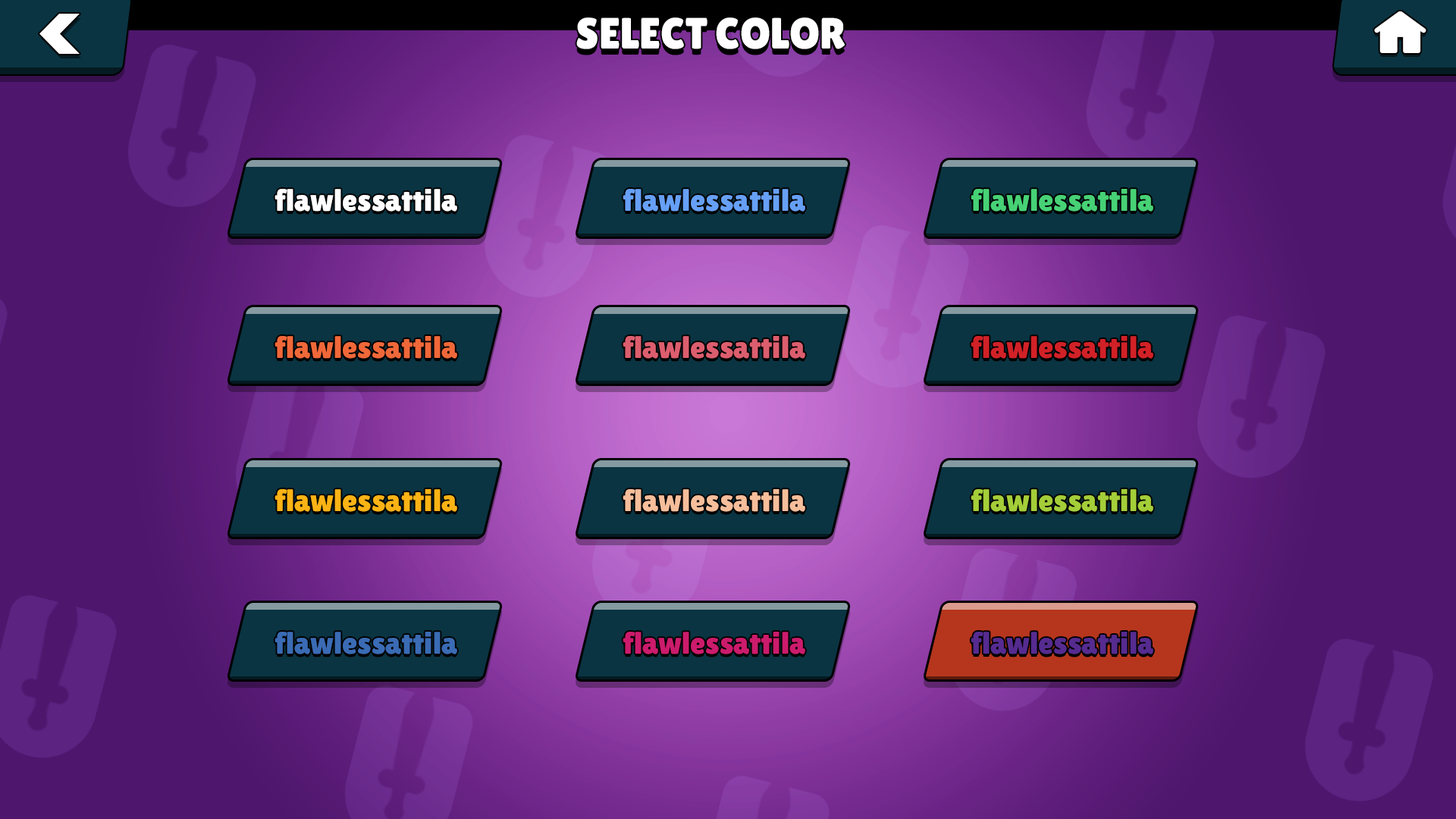
<style>
.page{position:relative;width:1456px;height:819px}
.page>*{position:absolute;margin:0}
.t1{font:43.6px "LilitaOne";color:#ffffff}
.t2{font:31px "LilitaOne";color:#ffffff}
.t3{font:31px "LilitaOne";color:#66a0f6}
.t4{font:31px "LilitaOne";color:#47d276}
.t5{font:31px "LilitaOne";color:#f06739}
.t6{font:31px "LilitaOne";color:#dc5e6e}
.t7{font:31px "LilitaOne";color:#d12127}
.t8{font:31px "LilitaOne";color:#fbb315}
.t9{font:31px "LilitaOne";color:#f6be9b}
.t10{font:31px "LilitaOne";color:#a4ce39}
.t11{font:31px "LilitaOne";color:#3a6bb4}
.t12{font:31px "LilitaOne";color:#cc1b6c}
.t13{font:31px "LilitaOne";color:#562b90}
</style>
<div class="page">
<p class="t1" style="left:576px;top:17px;width:269px;height:32px">SELECT COLOR</p>
<p class="t2" style="left:275px;top:189px;width:182px;height:23px">flawlessattila</p>
<p class="t3" style="left:623px;top:189px;width:182px;height:23px">flawlessattila</p>
<p class="t4" style="left:971px;top:189px;width:182px;height:23px">flawlessattila</p>
<p class="t5" style="left:275px;top:336px;width:182px;height:23px">flawlessattila</p>
<p class="t6" style="left:623px;top:336px;width:182px;height:23px">flawlessattila</p>
<p class="t7" style="left:971px;top:336px;width:182px;height:23px">flawlessattila</p>
<p class="t8" style="left:275px;top:489px;width:182px;height:23px">flawlessattila</p>
<p class="t9" style="left:623px;top:489px;width:182px;height:23px">flawlessattila</p>
<p class="t10" style="left:971px;top:489px;width:182px;height:23px">flawlessattila</p>
<p class="t11" style="left:275px;top:632px;width:182px;height:22px">flawlessattila</p>
<p class="t12" style="left:623px;top:632px;width:182px;height:22px">flawlessattila</p>
<p class="t13" style="left:971px;top:632px;width:182px;height:22px">flawlessattila</p>
</div>
